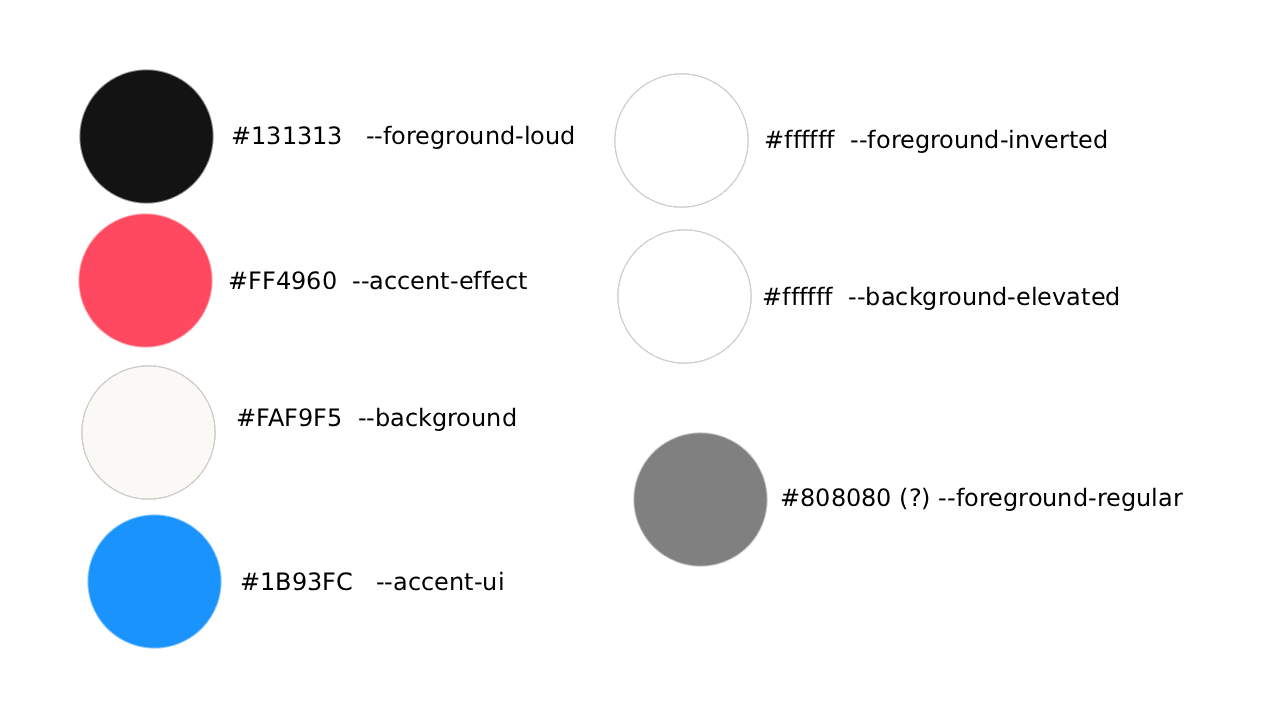
<style>
.page{position:relative;width:1280px;height:720px;background:#ffffff}
.page>*{position:absolute;margin:0}
.t1{font:24px "DejaVuSans";color:#000000}
</style>
<div class="page">
<p class="t1" style="left:232px;top:125px;width:342px;height:24px">#131313   --foreground-loud</p>
<p class="t1" style="left:765px;top:129px;width:342px;height:24px">#ffffff  --foreground-inverted</p>
<p class="t1" style="left:229px;top:270px;width:298px;height:20px">#FF4960  --accent-effect</p>
<p class="t1" style="left:763px;top:286px;width:356px;height:24px">#ffffff  --background-elevated</p>
<p class="t1" style="left:237px;top:407px;width:279px;height:24px">#FAF9F5  --background</p>
<p class="t1" style="left:781px;top:487px;width:402px;height:24px">#808080 (?) --foreground-regular</p>
<p class="t1" style="left:241px;top:571px;width:262px;height:20px">#1B93FC   --accent-ui</p>
</div>
